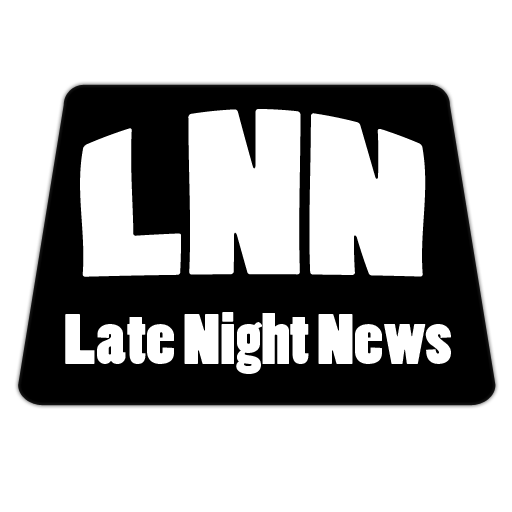
<style>
.page{position:relative;width:512px;height:512px;background:#ffffff}
.page>*{position:absolute;margin:0}
.t1{font:205px "PoplarStd";color:#ffffff}
.t2{font:66.9px "PoplarStd";color:#ffffff;scale:1.15 1}
</style>
<div class="page">
<p class="t1" style="left:80px;top:109px;width:346px;height:168px">LNN</p>
<p class="t2" style="left:65px;top:312px;width:386px;height:62px">Late Night News</p>
</div>
